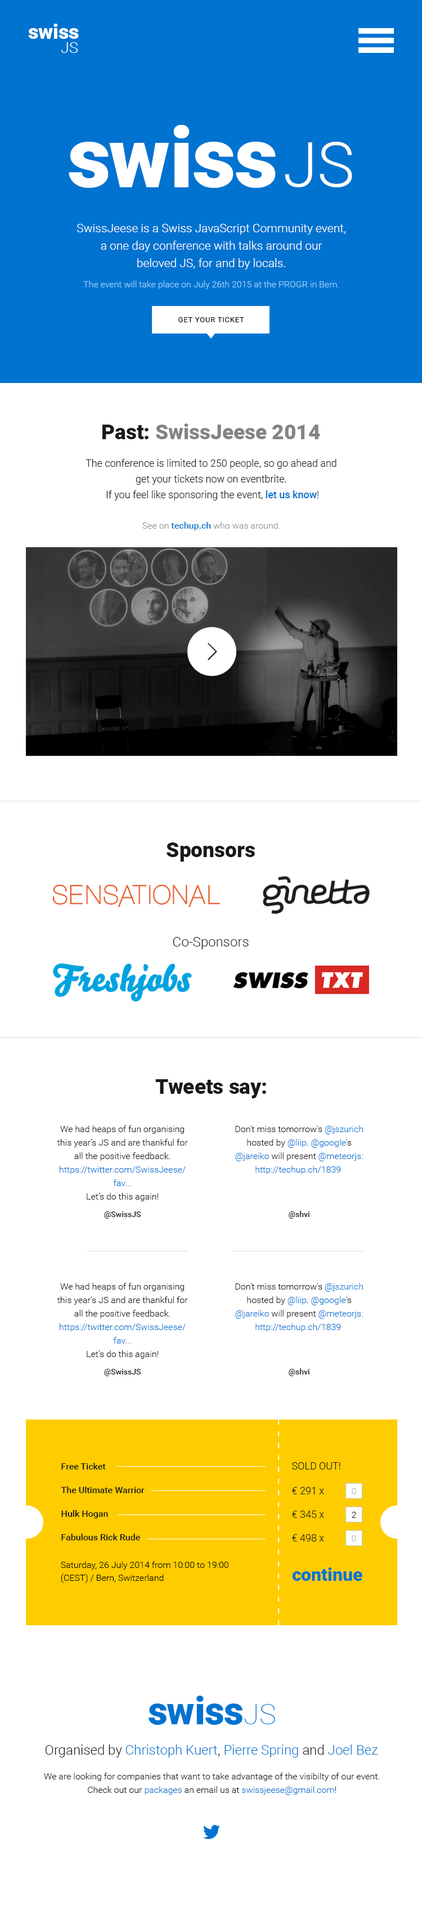
<style>
.page{position:relative;width:422px;height:1911px;background:#ffffff}
.page>*{position:absolute;margin:0}
.t1{font:20.3px "Roboto-Black";letter-spacing:-0.01em;color:#ffffff}
.t2{font:20.3px "Roboto-Black";letter-spacing:-0.02em;color:#ffffff}
.t3{font:20.3px "Roboto-Black";color:#ffffff}
.t4{font:15px "Roboto-Light";color:#ffffff}
.t5{font:84.4px "Roboto-Black";letter-spacing:-0.01em;color:#ffffff}
.t6{font:84.4px "Roboto-Black";letter-spacing:-0.02em;color:#ffffff}
.t7{font:84.4px "Roboto-Black";color:#ffffff}
.t8{font:62.4px "Roboto-Light";color:#ffffff}
.t9{font:11.8px/17.4px "Roboto-Light";color:#ffffff}
.t10{font:9px "Roboto-Light";color:#9bd2ff}
.t11{font:7.3px "Roboto-Regular";letter-spacing:0.06em;color:#000000;text-transform:uppercase}
.t12{font:20.8px "Roboto-Black";color:#848484}
.t13{font:20.8px "Roboto-Black";color:#191919}
.t14{font:10.1px/15.8px "Roboto-Light";color:#191919}
.t15{font:10.1px/15.8px "Roboto-Medium";color:#0073d0}
.t16{font:9px "Roboto-Light";color:#909090}
.t17{font:9px "Roboto-Medium";color:#0073d0}
.t18{font:13.5px "Roboto-Light";color:#191919}
.t19{font:9px/13.5px "Roboto-Light";color:#191919}
.t20{font:9px/13.5px "Roboto-Light";color:#0073d0}
.t21{font:9px/13.5px "Roboto-Light";color:#0075d1}
.t22{font:7.9px "Roboto-Medium";color:#191919}
.t23{font:9px/23.6px "Roboto-Medium";color:#191919}
.t24{font:10.1px "Roboto-Light";color:#191919;text-transform:uppercase}
.t25{font:10.1px/23.6px "Roboto-Light";color:#191919}
.t26{font:9px "Roboto-Light";color:#a9afb3}
.t27{font:9px "Roboto-Light";color:#191919}
.t28{font:9px/12.9px "Roboto-Light";color:#000000}
.t29{font:18px "Roboto-Black";color:#0074d0}
.t30{font:38.4px "Roboto-Black";letter-spacing:-0.01em;color:#0073d0}
.t31{font:38.4px "Roboto-Black";letter-spacing:-0.02em;color:#0073d0}
.t32{font:38.4px "Roboto-Black";color:#0073d0}
.t33{font:28.3px "Roboto-Thin";color:#0073d0}
.t34{font:13.5px "Roboto-Light";color:#0073d0}
</style>
<div class="page">
<p class="t1" style="left:28px;top:24px;width:51px;height:15px"><span class="t2">s</span><span class="t3">w</span>is<span class="t3">s</span></p>
<p class="t4" style="left:61px;top:42px;width:17px;height:11px">JS</p>
<p class="t5" style="left:69px;top:125px;width:207px;height:63px"><span class="t6">s</span><span class="t7">w</span>is<span class="t7">s</span></p>
<p class="t8" style="left:285px;top:142px;width:67px;height:45px">JS</p>
<p class="t9" style="left:77px;top:224px;width:268px;height:45px;text-align:center">SwissJeese is a Swiss JavaScript Community event,<br>a one day conference with talks around our<br>beloved JS, for and by locals.</p>
<p class="t10" style="left:83px;top:281px;width:256px;height:8px">The event will take place on July 26th 2015 at the PROGR in Bern.</p>
<p class="t11" style="left:178px;top:317px;width:66px;height:5px">get your ticket</p>
<p class="t12" style="left:102px;top:424px;width:218px;height:15px"><span class="t13">Past: </span>SwissJeese 2014</p>
<p class="t14" style="left:86px;top:459px;width:250px;height:42px;text-align:center">The conference is limited to 250 people, so go ahead and <br>get your tickets now on eventbrite. <br>If you feel like sponsoring the event, <span class="t15">let us know</span>!</p>
<p class="t16" style="left:142px;top:522px;width:138px;height:8px">See on <span class="t17">techup.ch </span>who was around.</p>
<p class="t13" style="left:167px;top:843px;width:88px;height:19px">Sponsors</p>
<p class="t18" style="left:173px;top:937px;width:76px;height:13px">Co-Sponsors</p>
<p class="t13" style="left:155px;top:1079px;width:111px;height:20px">Tweets say:</p>
<p class="t19" style="left:57px;top:1126px;width:131px;height:76px;text-align:center">We had heaps of fun organising<br>this year’s JS and are thankful for<br>all the positive feedback.<br><span class="t20">https://twitter.com/SwissJeese/<br>fav...<br></span>Let’s do this again!</p>
<p class="t20" style="left:235px;top:1126px;width:128px;height:49px;text-align:center"><span class="t19">Don't miss tomorrow's </span><span class="t21">@jszurich<br></span><span class="t19">hosted by </span>@liip<span class="t19">. </span>@google<span class="t19">'s<br></span>@jareiko<span class="t19"> will present </span>@meteorjs:<br>http://techup.ch/1839</p>
<p class="t22" style="left:104px;top:1212px;width:37px;height:7px">@SwissJS</p>
<p class="t22" style="left:289px;top:1211px;width:20px;height:8px">@shvi</p>
<p class="t19" style="left:57px;top:1283px;width:131px;height:76px;text-align:center">We had heaps of fun organising<br>this year’s JS and are thankful for<br>all the positive feedback.<br><span class="t20">https://twitter.com/SwissJeese/<br>fav...<br></span>Let’s do this again!</p>
<p class="t20" style="left:235px;top:1283px;width:128px;height:49px;text-align:center"><span class="t19">Don't miss tomorrow's </span><span class="t21">@jszurich<br></span><span class="t19">hosted by </span>@liip<span class="t19">. </span>@google<span class="t19">'s<br></span>@jareiko<span class="t19"> will present </span>@meteorjs:<br>http://techup.ch/1839</p>
<p class="t22" style="left:104px;top:1369px;width:37px;height:7px">@SwissJS</p>
<p class="t22" style="left:289px;top:1369px;width:20px;height:7px">@shvi</p>
<p class="t23" style="left:61px;top:1463px;width:84px;height:78px">Free Ticket<br>The Ultimate Warrior<br>Hulk Hogan<br>Fabulous Rick Rude</p>
<p class="t24" style="left:292px;top:1463px;width:48px;height:7px">Sold out!</p>
<p class="t25" style="left:292px;top:1487px;width:32px;height:55px">€ 291 x<br>€ 345 x<br>€ 498 x</p>
<p class="t26" style="left:352px;top:1488px;width:4px;height:7px">0</p>
<p class="t27" style="left:352px;top:1512px;width:4px;height:6px">2</p>
<p class="t26" style="left:352px;top:1536px;width:4px;height:6px">0</p>
<p class="t28" style="left:61px;top:1562px;width:167px;height:21px">Saturday, 26 July 2014 from 10:00 to 19:00<br>(CEST) / Bern, Switzerland</p>
<p class="t29" style="left:292px;top:1568px;width:70px;height:13px">continue</p>
<p class="t30" style="left:149px;top:1696px;width:93px;height:29px"><span class="t31">s</span><span class="t32">w</span>is<span class="t32">s</span></p>
<p class="t33" style="left:245px;top:1704px;width:30px;height:21px">JS</p>
<p class="t34" style="left:45px;top:1745px;width:333px;height:13px"><span class="t18">Organised by </span>Christoph Kuert<span class="t18">, </span>Pierre Spring<span class="t18"> and </span>Joel Bez</p>
<p class="t19" style="left:44px;top:1773px;width:335px;height:23px;text-align:center">We are looking for companies that want to take advantage of the visibilty of our event.<br>Check out our <span class="t20">packages</span> an email us at <span class="t20">swissjeese@gmail.com</span>!</p>
</div>
